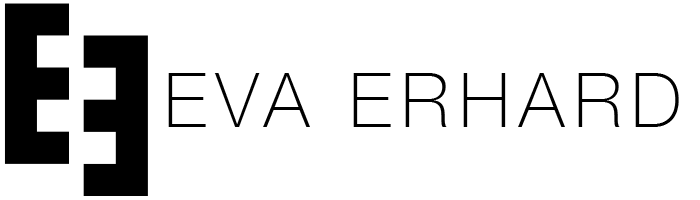
<style>
.page{position:relative;width:700px;height:200px;background:#ffffff}
.page>*{position:absolute;margin:0}
.t1{font:76px "HelveticaNeue-Thin";letter-spacing:0.125em;color:#000000}
</style>
<div class="page">
<p class="t1" style="left:168px;top:73px;width:511px;height:54px">EVA ERHARD</p>
</div>
